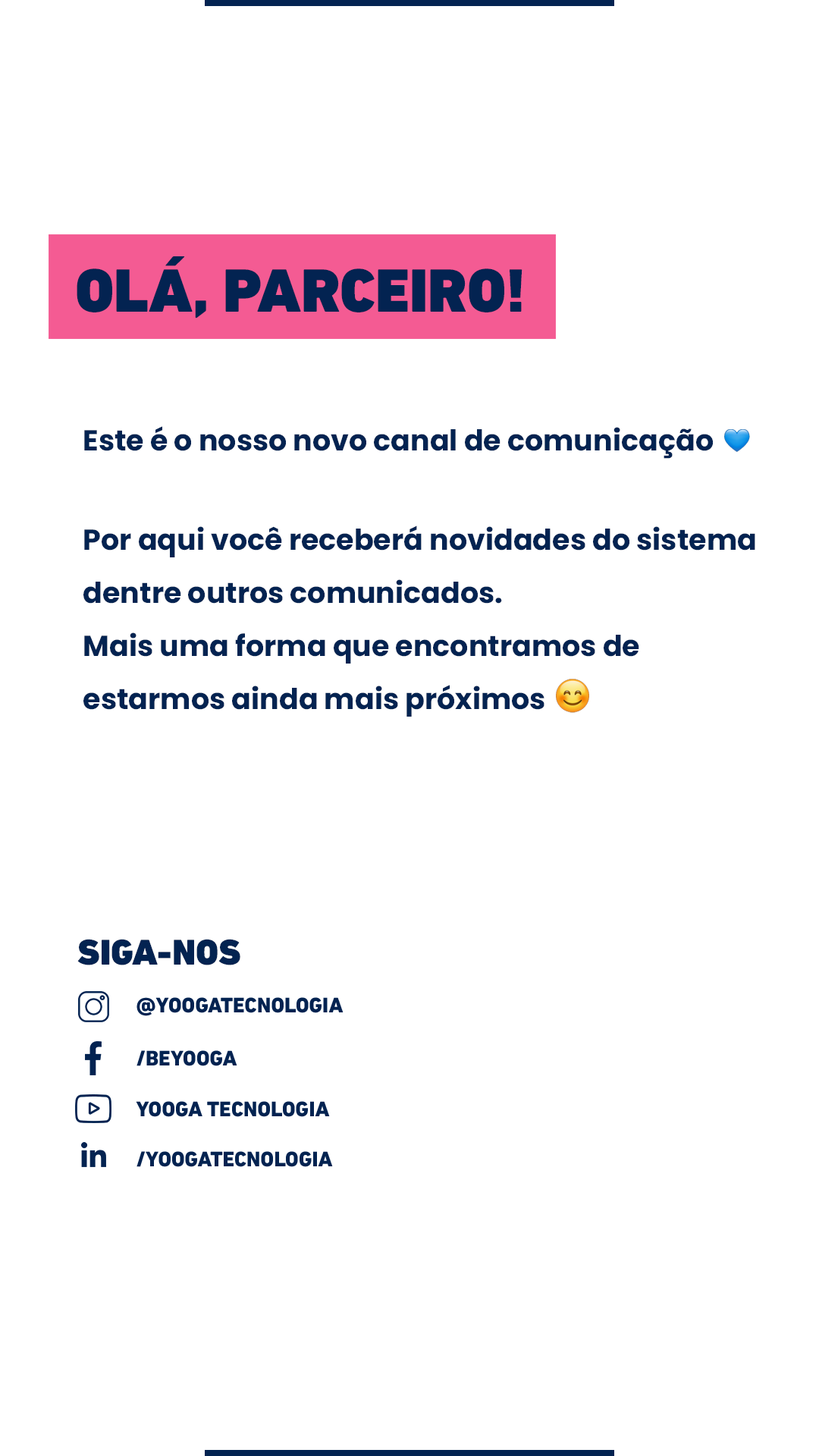
<style>
.page{position:relative;width:819px;height:1456px;background:#ffffff}
.page>*{position:absolute;margin:0}
.t1{font:62.1px "DINNextLTPro-Black";color:#032351;text-transform:uppercase}
.t2{font:28.8px "Poppins-Bold";color:#032351}
.t3{font:28.8px/53.1px "Poppins-Bold";color:#032351}
.t4{font:36.4px "DINNextLTPro-Black";color:#032351;text-transform:uppercase}
.t5{font:21.3px "DINNextLTPro-Heavy";color:#032351;text-transform:uppercase}
</style>
<div class="page">
<p class="t1" style="left:77px;top:256px;width:445px;height:62px">Olá, Parceiro!</p>
<p class="t2" style="left:84px;top:426px;width:629px;height:33px">Este é o nosso novo canal de comunicação</p>
<p class="t3" style="left:83px;top:526px;width:672px;height:191px">Por aqui você receberá novidades do sistema dentre outros comunicados.<br>Mais uma forma que encontramos de               estarmos ainda mais próximos</p>
<p class="t4" style="left:77px;top:939px;width:163px;height:26px">siga-nOs</p>
<p class="t5" style="left:136px;top:997px;width:208px;height:19px">@yoogatecnologia</p>
<p class="t5" style="left:136px;top:1050px;width:101px;height:16px">/beyooga</p>
<p class="t5" style="left:136px;top:1101px;width:194px;height:16px">yooga tecnologia</p>
<p class="t5" style="left:136px;top:1151px;width:197px;height:16px">/yoogatecnologia</p>
</div>
